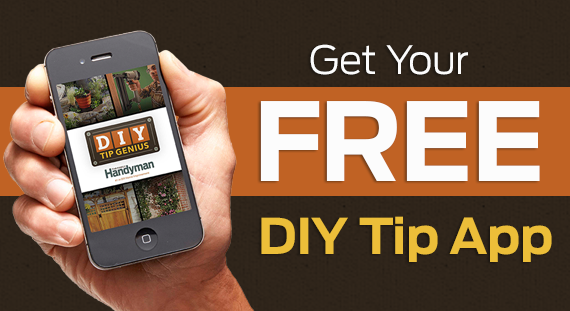
<style>
.page{position:relative;width:570px;height:311px}
.page>*{position:absolute;margin:0}
.t1{font:38.9px "Antenna-Light";color:#fcfcfc}
.t2{font:107.8px "Antenna-Bold";color:#fcfcfc}
.t3{font:49.1px "Antenna-Bold";color:#ecbe39}
</style>
<div class="page">
<p class="t1" style="left:310px;top:44px;width:158px;height:31px">Get Your</p>
<p class="t2" style="left:260px;top:101px;width:280px;height:80px">FREE</p>
<p class="t3" style="left:261px;top:216px;width:291px;height:46px">DIY Tip App</p>
</div>
